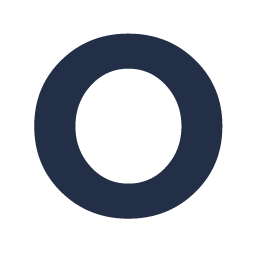
<style>
.page{position:relative;width:256px;height:256px;background:#ffffff}
.page>*{position:absolute;margin:0}
.t1{font:256px "Montserrat-Bold";letter-spacing:0.025em;color:#232f46}
</style>
<div class="page">
<p class="t1" style="left:34px;top:33px;width:189px;height:186px">O</p>
</div>
